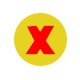
<style>
.page{position:relative;width:80px;height:80px;background:#ffffff}
.page>*{position:absolute;margin:0}
.t1{font:35.5px "CartoonistKooky";color:#ff0000;scale:1.34 1}
</style>
<div class="page">
<p class="t1" style="left:25px;top:25px;width:31px;height:30px">x</p>
</div>
